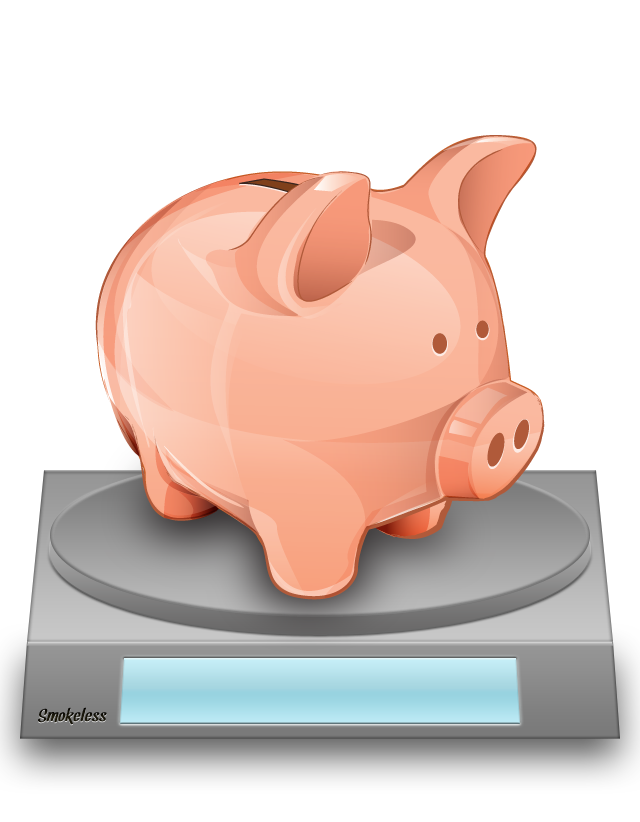
<style>
.page{position:relative;width:640px;height:822px;background:#ffffff}
.page>*{position:absolute;margin:0}
.t1{font:18px "Snickles";letter-spacing:0.025em;color:#2c2813;scale:1.2 1}
</style>
<div class="page">
<p class="t1" style="left:38px;top:707px;width:69px;height:18px">Smokeless</p>
</div>
